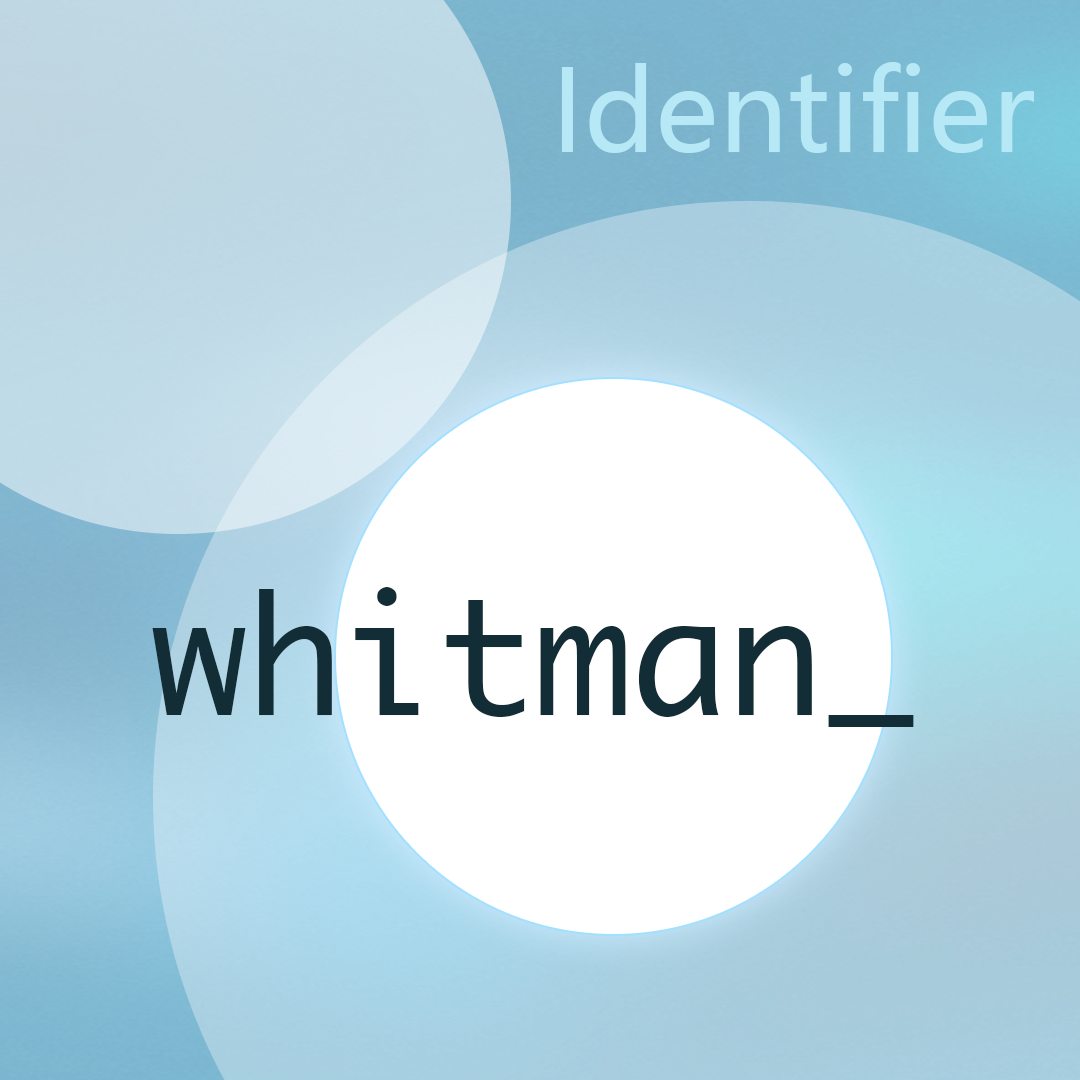
<style>
.page{position:relative;width:1080px;height:1080px}
.page>*{position:absolute;margin:0}
.t1{font:112px "MicrosoftYaHei";color:#b7e8f6}
.t2{font:160px "Monaco";color:#132d36}
</style>
<div class="page">
<p class="t1" style="left:561px;top:62px;width:473px;height:91px">Identifier</p>
<p class="t2" style="left:152px;top:587px;width:762px;height:140px">whitman_</p>
</div>
